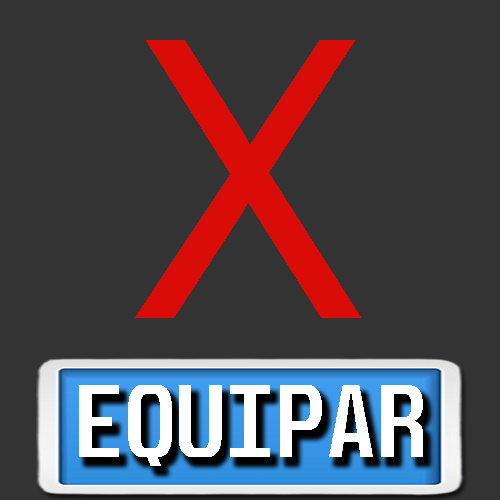
<style>
.page{position:relative;width:500px;height:500px;background:#333333}
.page>*{position:absolute;margin:0}
.t1{font:388px "ArialMT";color:#d90c08;scale:0.89 1}
.t2{font:88.1px "Unispace-Bold";color:#ffffff;scale:0.94 1}
.t3{font:87.7px "Unispace-Bold";color:#ffffff;scale:0.94 1}
</style>
<div class="page">
<p class="t1" style="left:135px;top:40px;width:226px;height:278px">X</p>
<p class="t2" style="left:79px;top:385px;width:344px;height:81px">EQUIPA<span class="t3">R</span></p>
</div>
